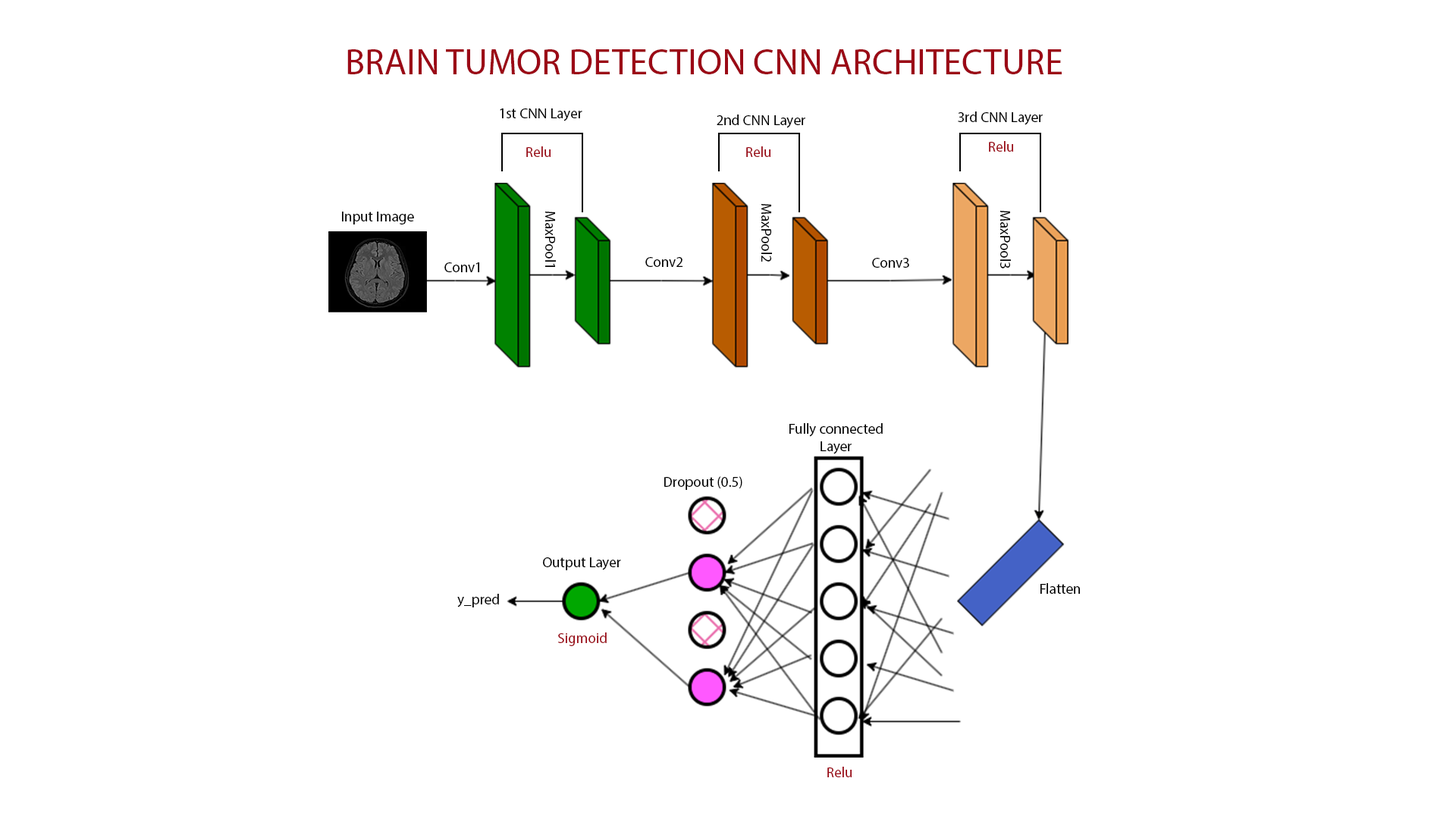
<style>
.page{position:relative;width:1456px;height:819px;background:#ffffff}
.page>*{position:absolute;margin:0}
.t1{font:36.4px "MyriadPro-Regular";color:#9b0916}
.t2{font:14.4px "MyriadPro-Regular";color:#000000}
.t3{font:14.4px "MyriadPro-Regular";color:#9b0916}
</style>
<div class="page">
<p class="t1" style="left:347px;top:49px;width:715px;height:25px">BRAIN TUMOR DETECTION CNN ARCHITECTURE</p>
<p class="t2" style="left:500px;top:108px;width:82px;height:13px">1st CNN Layer</p>
<p class="t2" style="left:958px;top:111px;width:85px;height:14px">3rd CNN Layer</p>
<p class="t2" style="left:717px;top:115px;width:88px;height:13px">2nd CNN Layer</p>
<p class="t3" style="left:526px;top:146px;width:25px;height:11px">Relu</p>
<p class="t3" style="left:746px;top:146px;width:24px;height:11px">Relu</p>
<p class="t3" style="left:989px;top:141px;width:24px;height:11px">Relu</p>
<p class="t2" style="left:761px;top:204px;width:11px;height:58px;rotate:90deg">MaxPool2</p>
<p class="t2" style="left:342px;top:212px;width:72px;height:12px">Input Image</p>
<p class="t2" style="left:545px;top:212px;width:11px;height:55px;rotate:90deg">MaxPool1</p>
<p class="t2" style="left:1000px;top:211px;width:11px;height:57px;rotate:90deg">MaxPool3</p>
<p class="t2" style="left:645px;top:257px;width:37px;height:10px">Conv2</p>
<p class="t2" style="left:872px;top:258px;width:37px;height:10px">Conv3</p>
<p class="t2" style="left:444px;top:262px;width:35px;height:10px">Conv1</p>
<p class="t2" style="left:789px;top:423px;width:94px;height:31px;text-align:center">Fully connected<br>Layer</p>
<p class="t2" style="left:664px;top:476px;width:78px;height:14px">Dropout (0.5)</p>
<p class="t2" style="left:543px;top:557px;width:78px;height:13px">Output Layer</p>
<p class="t2" style="left:457px;top:594px;width:42px;height:13px">y_pred</p>
<p class="t2" style="left:1040px;top:583px;width:40px;height:11px">Flatten</p>
<p class="t3" style="left:558px;top:632px;width:49px;height:14px">Sigmoid</p>
<p class="t3" style="left:827px;top:767px;width:25px;height:10px">Relu</p>
</div>
